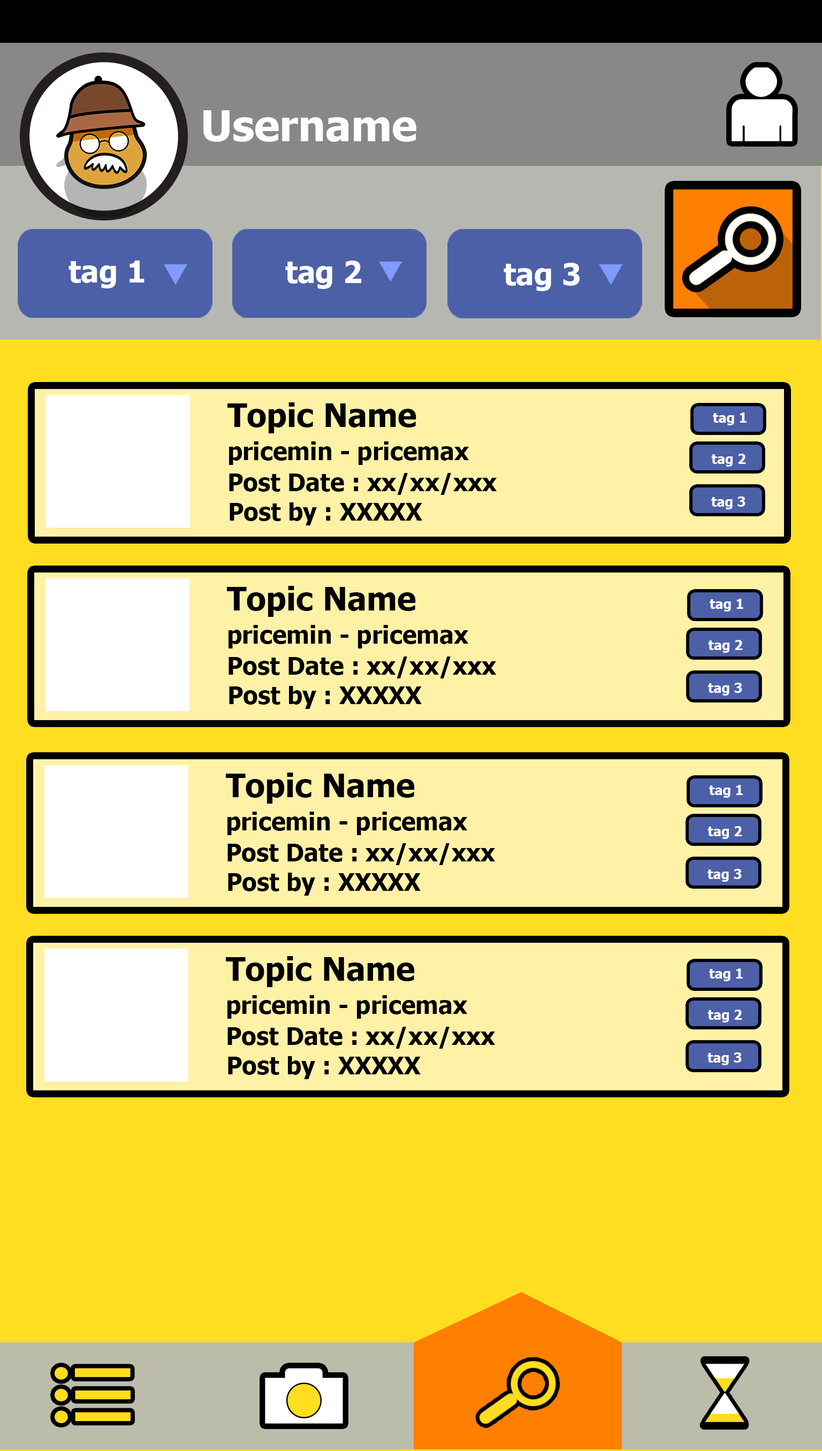
<style>
.page{position:relative;width:822px;height:1451px;background:#ffdd20}
.page>*{position:absolute;margin:0}
.t1{font:42.8px "Tahoma-Bold";color:#ffffff}
.t2{font:30.7px "Tahoma-Bold";color:#fefefe}
.t3{font:32.1px "Tahoma-Bold";color:#000000}
.t4{font:13.4px "Tahoma-Bold";color:#fefefe}
.t5{font:24.1px "Tahoma-Bold";color:#000000}
</style>
<div class="page">
<p class="t1" style="left:203px;top:110px;width:213px;height:32px">Username</p>
<p class="t2" style="left:68px;top:261px;width:76px;height:27px">tag 1</p>
<p class="t2" style="left:285px;top:261px;width:77px;height:28px">tag 2</p>
<p class="t2" style="left:503px;top:263px;width:76px;height:28px">tag 3</p>
<p class="t3" style="left:227px;top:402px;width:189px;height:31px">Topic Name</p>
<p class="t4" style="left:713px;top:413px;width:33px;height:12px">tag 1</p>
<p class="t5" style="left:229px;top:441px;width:240px;height:24px">pricemin - pricemax</p>
<p class="t4" style="left:711px;top:454px;width:35px;height:13px">tag 2</p>
<p class="t5" style="left:229px;top:473px;width:268px;height:22px">Post Date : xx/xx/xxx</p>
<p class="t4" style="left:711px;top:497px;width:34px;height:12px">tag 3</p>
<p class="t5" style="left:230px;top:502px;width:192px;height:23px">Post by : XXXXX</p>
<p class="t3" style="left:227px;top:586px;width:189px;height:31px">Topic Name</p>
<p class="t4" style="left:709px;top:599px;width:34px;height:13px">tag 1</p>
<p class="t5" style="left:228px;top:625px;width:241px;height:23px">pricemin - pricemax</p>
<p class="t4" style="left:708px;top:640px;width:35px;height:13px">tag 2</p>
<p class="t5" style="left:228px;top:656px;width:269px;height:22px">Post Date : xx/xx/xxx</p>
<p class="t5" style="left:229px;top:686px;width:193px;height:23px">Post by : XXXXX</p>
<p class="t4" style="left:708px;top:683px;width:34px;height:13px">tag 3</p>
<p class="t3" style="left:226px;top:773px;width:189px;height:31px">Topic Name</p>
<p class="t4" style="left:709px;top:785px;width:34px;height:13px">tag 1</p>
<p class="t5" style="left:227px;top:812px;width:241px;height:23px">pricemin - pricemax</p>
<p class="t4" style="left:707px;top:826px;width:35px;height:13px">tag 2</p>
<p class="t5" style="left:227px;top:843px;width:268px;height:22px">Post Date : xx/xx/xxx</p>
<p class="t4" style="left:707px;top:869px;width:35px;height:13px">tag 3</p>
<p class="t5" style="left:228px;top:873px;width:193px;height:23px">Post by : XXXXX</p>
<p class="t3" style="left:226px;top:956px;width:189px;height:31px">Topic Name</p>
<p class="t4" style="left:709px;top:968px;width:34px;height:13px">tag 1</p>
<p class="t5" style="left:227px;top:995px;width:241px;height:24px">pricemin - pricemax</p>
<p class="t4" style="left:707px;top:1010px;width:35px;height:12px">tag 2</p>
<p class="t5" style="left:227px;top:1027px;width:268px;height:22px">Post Date : xx/xx/xxx</p>
<p class="t5" style="left:228px;top:1056px;width:193px;height:23px">Post by : XXXXX</p>
<p class="t4" style="left:707px;top:1052px;width:35px;height:13px">tag 3</p>
</div>
